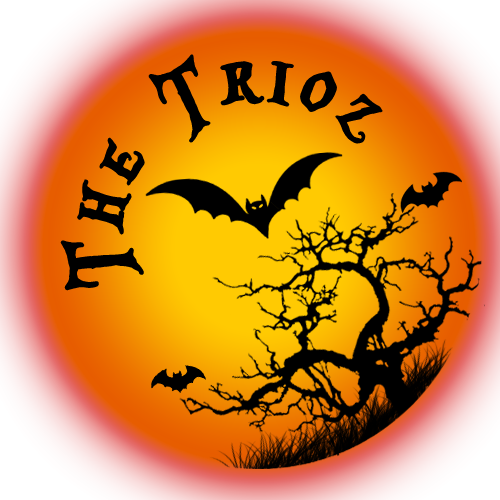
<style>
.page{position:relative;width:500px;height:500px}
.page>*{position:absolute;margin:0}
.t1{font:104px/50.4px "AliceinWonderland";color:#000000;font-weight:bold}
</style>
<div class="page">
<p class="t1" style="left:60px;top:54px;width:323px;height:237px">The Trioz</p>
</div>
